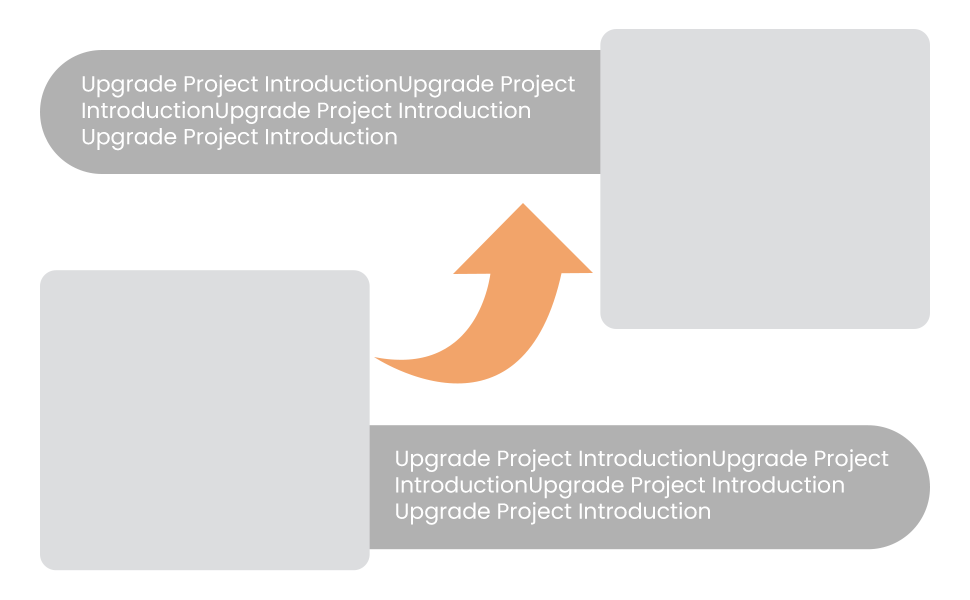
<style>
.page{position:relative;width:970px;height:600px;background:#ffffff}
.page>*{position:absolute;margin:0}
.t1{font:22px "Poppins-Regular";color:#ffffff}
</style>
<div class="page">
<p class="t1" style="left:82px;top:74px;width:493px;height:77px">Upgrade Project IntroductionUpgrade Project<br>IntroductionUpgrade Project Introduction<br>Upgrade Project Introduction</p>
<p class="t1" style="left:396px;top:449px;width:493px;height:76px">Upgrade Project IntroductionUpgrade Project<br>IntroductionUpgrade Project Introduction<br>Upgrade Project Introduction</p>
</div>
